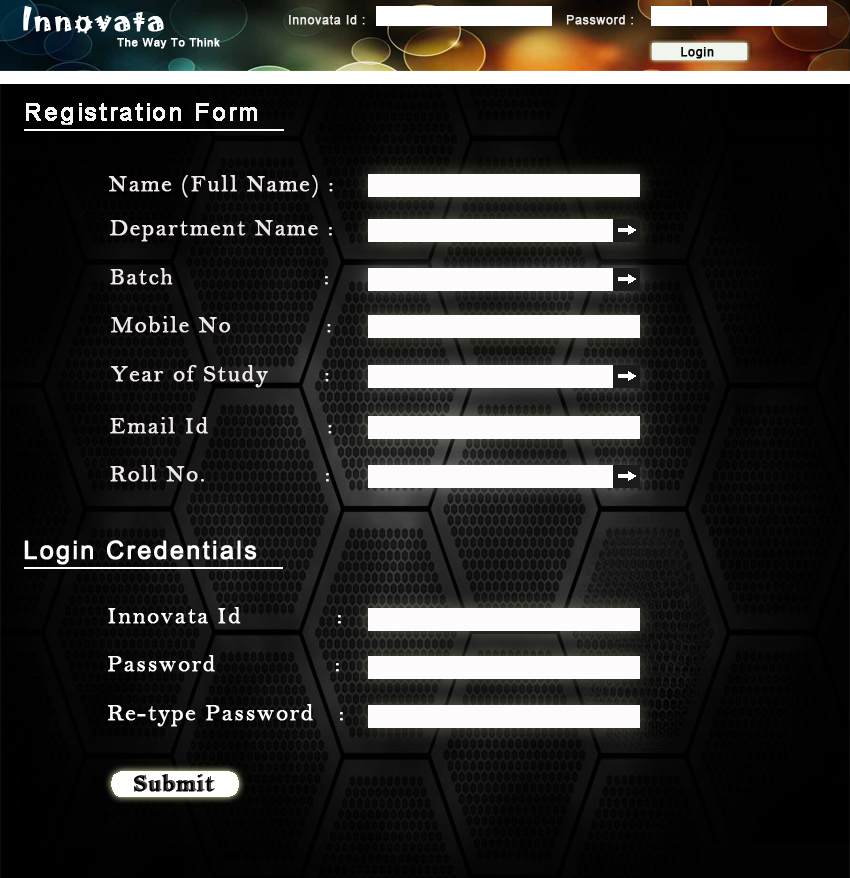
<style>
.page{position:relative;width:850px;height:878px}
.page>*{position:absolute;margin:0}
.t1{font:30px "Jokerman-Regular";letter-spacing:0.05em;color:#ffffff;font-weight:bold}
.t2{font:12px "ArialMT";letter-spacing:0.05em;color:#efeaea;font-weight:bold}
.t3{font:11px "ArialMT";letter-spacing:0.05em;color:#ffffff;font-weight:bold}
.t4{font:12px "ArialMT";letter-spacing:0.05em;color:#030303;font-weight:bold}
.t5{font:24px "BellMT";letter-spacing:0.05em;color:#efe8e8;font-weight:bold}
.t6{font:25px "ArialMT";letter-spacing:0.07em;color:#fdfefd;font-weight:bold}
.t7{font:24px "BellMT";letter-spacing:0.05em;color:#fdfefd;font-weight:bold}
.t8{font:24px "BellMT";letter-spacing:0.05em;color:#000000;font-weight:bold}
</style>
<div class="page">
<p class="t1" style="left:23px;top:6px;width:141px;height:28px">Innovata</p>
<p class="t2" style="left:289px;top:15px;width:76px;height:10px">Innovata Id :</p>
<p class="t2" style="left:566px;top:15px;width:67px;height:10px">Password :</p>
<p class="t3" style="left:117px;top:38px;width:103px;height:11px">The Way To Think</p>
<p class="t4" style="left:681px;top:47px;width:33px;height:12px">Login</p>
<p class="t5" style="left:108px;top:175px;width:225px;height:23px">Name (Full Name) :</p>
<p class="t5" style="left:109px;top:220px;width:223px;height:22px">Department Name :</p>
<p class="t5" style="left:110px;top:268px;width:218px;height:17px">Batch                   :</p>
<p class="t5" style="left:111px;top:316px;width:220px;height:17px">Mobile No            :</p>
<p class="t5" style="left:110px;top:365px;width:219px;height:23px">Year of Study       :</p>
<p class="t5" style="left:110px;top:417px;width:222px;height:17px">Email Id               :</p>
<p class="t5" style="left:110px;top:465px;width:219px;height:17px">Roll No.               :</p>
<p class="t6" style="left:24px;top:540px;width:233px;height:25px">Login Credentials</p>
<p class="t7" style="left:108px;top:607px;width:233px;height:17px">Innovata Id            :</p>
<p class="t7" style="left:108px;top:655px;width:231px;height:17px">Password               :</p>
<p class="t7" style="left:108px;top:704px;width:235px;height:23px">Re-type Password   :</p>
<p class="t8" style="left:134px;top:775px;width:79px;height:17px">Submit</p>
</div>
